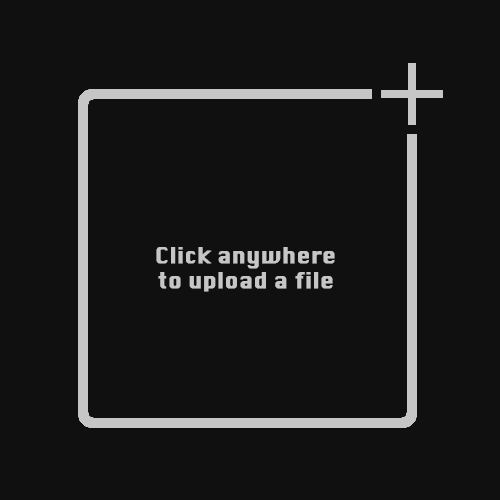
<style>
.page{position:relative;width:500px;height:500px;background:#101010}
.page>*{position:absolute;margin:0}
.t1{font:20.8px "Silom";color:#c6c6c6;font-weight:bold}
</style>
<div class="page">
<p class="t1" style="left:156px;top:247px;width:179px;height:45px;text-align:center">Click anywhere<br>to upload a file</p>
</div>
